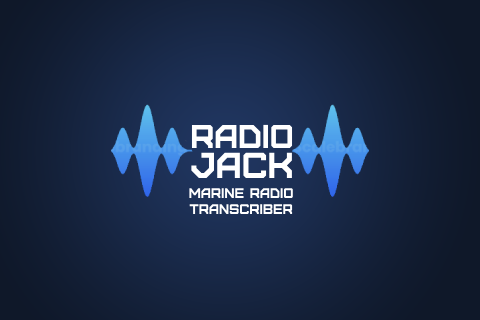
<style>
.page{position:relative;width:480px;height:320px}
.page>*{position:absolute;margin:0}
.t1{font:33px/30px "Furore";color:#ffffff}
.t2{font:36px/30px "Furore";color:#ffffff}
.t3{font:14px/16.1px "Furore";color:#ffffff}
</style>
<div class="page">
<p class="t1" style="left:191px;top:124px;width:102px;height:54px;text-align:center">RADio<br><span class="t2">JACK</span></p>
<p class="t3" style="left:189px;top:188px;width:104px;height:26px;text-align:center">marine radio transcriber</p>
</div>
